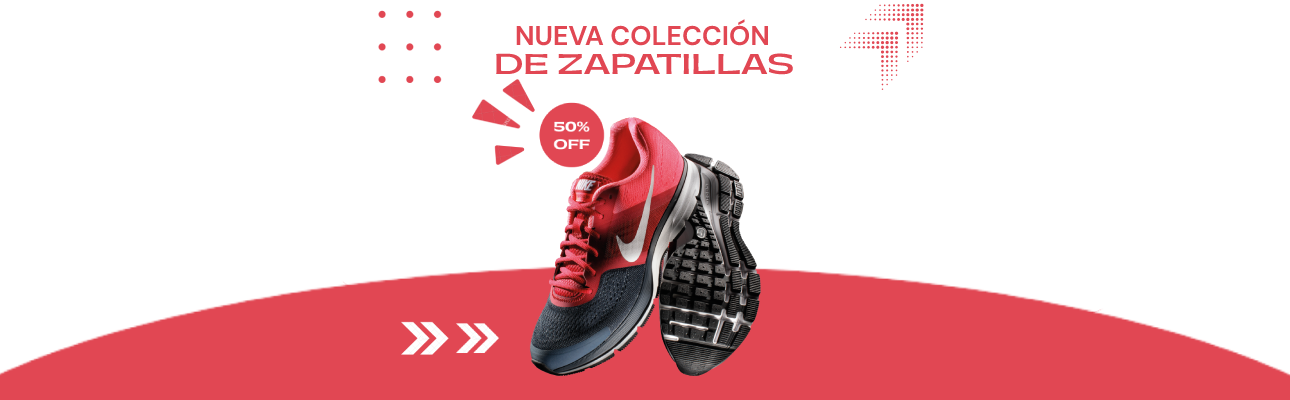
<style>
.page{position:relative;width:1290px;height:400px;background:#ffffff}
.page>*{position:absolute;margin:0}
.t1{font:27px "DMSans-Bold";color:#e14753}
.t2{font:27px "PPGatwick-Bold";color:#e14753}
</style>
<div class="page">
<p class="t1" style="left:516px;top:19px;width:252px;height:27px">NUEVA COLECCIÓN</p>
<p class="t2" style="left:496px;top:53px;width:297px;height:22px">DE ZAPATILLAS</p>
</div>
